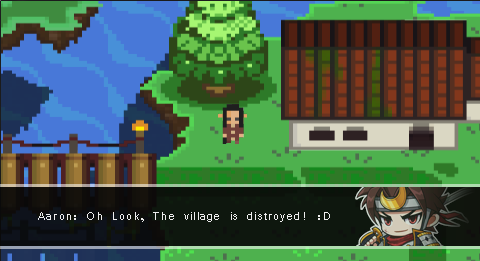
<style>
.page{position:relative;width:480px;height:261px}
.page>*{position:absolute;margin:0}
.t1{font:12px "Vrinda";letter-spacing:0.1em;color:#fefefe}
</style>
<div class="page">
<p class="t1" style="left:38px;top:212px;width:292px;height:10px;opacity:0.9">Aaron: Oh Look, The village is distroyed! :D</p>
</div>
